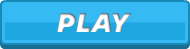
<style>
.page{position:relative;width:190px;height:49px;background:#35baf3}
.page>*{position:absolute;margin:0}
.t1{font:30px "FreightSansBlackItalic";color:#fdfdfd;text-transform:uppercase}
</style>
<div class="page">
<p class="t1" style="left:57px;top:13px;width:75px;height:19px">play</p>
</div>
